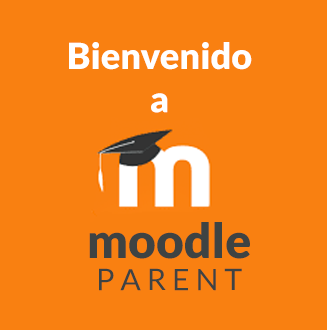
<style>
.page{position:relative;width:327px;height:330px;background:#f98011}
.page>*{position:absolute;margin:0}
.t1{font:36px "Lato-Black";color:#ffffff}
.t2{font:48px "Lato-Black";color:#3e4343}
.t3{font:30px "Lato-Regular";color:#3e4343}
</style>
<div class="page">
<p class="t1" style="left:69px;top:42px;width:183px;height:71px;text-align:center">Bienvenido <br>a</p>
<p class="t2" style="left:89px;top:222px;width:161px;height:37px">moodle</p>
<p class="t3" style="left:99px;top:268px;width:143px;height:23px">P A R E N T</p>
</div>
